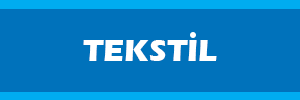
<style>
.page{position:relative;width:300px;height:100px;background:#0072bb}
.page>*{position:absolute;margin:0}
.t1{font:32px "ErasITC-Bold";color:#ffffff}
</style>
<div class="page">
<p class="t1" style="left:83px;top:40px;width:134px;height:21px">TEKSTIL</p>
</div>
